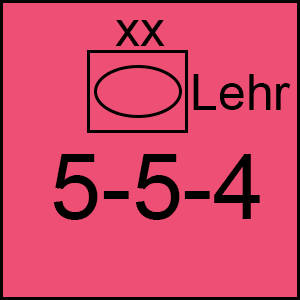
<style>
.page{position:relative;width:300px;height:300px;background:#ee4f74}
.page>*{position:absolute;margin:0}
.t1{font:50px "ArialMT";color:#000000}
.t2{font:91.7px "ArialMT";color:#000000}
</style>
<div class="page">
<p class="t1" style="left:115px;top:20px;width:50px;height:26px">xx</p>
<p class="t1" style="left:193px;top:74px;width:98px;height:36px">Lehr</p>
<p class="t2" style="left:53px;top:154px;width:207px;height:66px">5-5-4</p>
</div>
